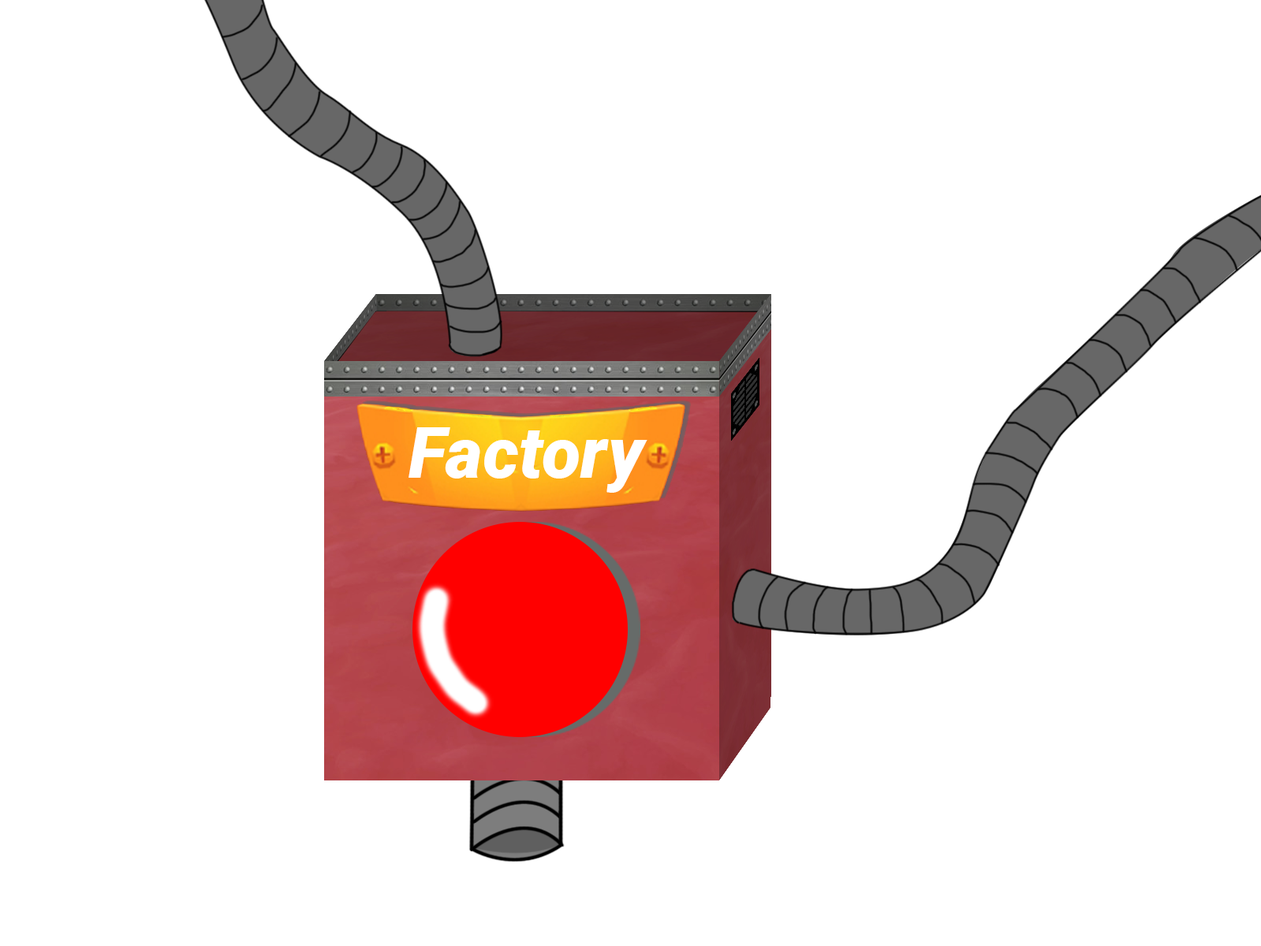
<style>
.page{position:relative;width:1261px;height:946px;background:#ffffff}
.page>*{position:absolute;margin:0}
.t1{font:70.9px "Roboto-BlackItalic";color:#ffffff}
</style>
<div class="page">
<p class="t1" style="left:408px;top:427px;width:239px;height:66px">Factory</p>
</div>
